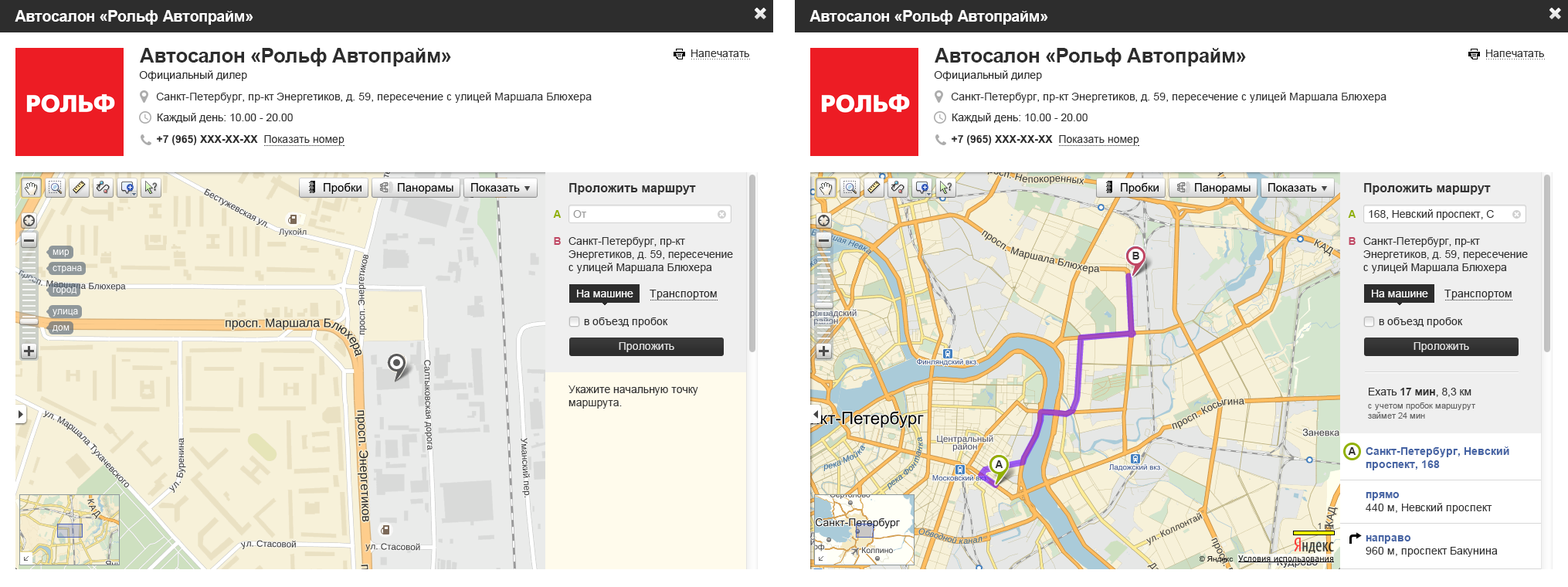
<style>
.page{position:relative;width:1568px;height:587px;background:#ffffff}
.page>*{position:absolute;margin:0}
.t1{font:15.4px "Arial-BoldMT";letter-spacing:-0.02em;color:#ffffff}
.t2{font:20.1px "Arial-BoldMT";letter-spacing:-0.02em;color:#2d2d2d}
.t3{font:10.8px "ArialMT";color:#333333}
.t4{font:9.3px "ArialMT";color:#666666}
.t5{font:10.8px "ArialMT";color:#2c2c2c}
.t6{font:10.8px "ArialMT";color:#2d2d2d}
.t7{font:12.4px "Arial-BoldMT";color:#333333}
.t8{font:10.8px "ArialMT";letter-spacing:-0.005em;color:#333333}
.t9{font:10.8px "Arial-BoldMT";color:#91b002}
.t10{font:10.8px "ArialMT";letter-spacing:-0.005em;color:#999999}
.t11{font:10.8px "Arial-BoldMT";color:#c04663}
.t12{font:10.8px "Arial-BoldMT";color:#333333}
.t13{font:10.8px "ArialMT";color:#ffffff}
.t14{font:10.8px "ArialMT";color:#e0e0e0}
.t15{font:10.8px "Arial-BoldMT";letter-spacing:-0.005em;color:#333333}
.t16{font:8.5px "ArialMT";color:#666666}
.t17{font:10.8px "Arial-BoldMT";color:#4664a4}
</style>
<div class="page">
<p class="t1" style="left:15px;top:10px;width:238px;height:15px">Автосалон «Рольф Автопрайм»</p>
<p class="t1" style="left:809px;top:10px;width:239px;height:15px">Автосалон «Рольф Автопрайм»</p>
<p class="t2" style="left:140px;top:48px;width:311px;height:18px">Автосалон «Рольф Автопрайм»</p>
<p class="t3" style="left:691px;top:49px;width:58px;height:8px">Напечатать</p>
<p class="t2" style="left:935px;top:48px;width:311px;height:18px">Автосалон «Рольф Автопрайм»</p>
<p class="t3" style="left:1486px;top:49px;width:58px;height:8px">Напечатать</p>
<p class="t4" style="left:691px;top:59px;width:59px;height:0px">..........................</p>
<p class="t4" style="left:1486px;top:59px;width:59px;height:0px">..........................</p>
<p class="t5" style="left:139px;top:70px;width:108px;height:11px">Официальный дилер</p>
<p class="t5" style="left:934px;top:70px;width:108px;height:11px">Официальный дилер</p>
<p class="t3" style="left:156px;top:92px;width:436px;height:11px">Санкт-Петербург, пр-кт Энергетиков, д. 59, пересечение с улицей Маршала Блюхера</p>
<p class="t3" style="left:951px;top:92px;width:435px;height:11px">Санкт-Петербург, пр-кт Энергетиков, д. 59, пересечение с улицей Маршала Блюхера</p>
<p class="t6" style="left:158px;top:113px;width:135px;height:10px">Каждый день: 10.00 - 20.00</p>
<p class="t6" style="left:952px;top:113px;width:136px;height:10px">Каждый день: 10.00 - 20.00</p>
<p class="t7" style="left:569px;top:183px;width:127px;height:12px">Проложить маршрут</p>
<p class="t7" style="left:1364px;top:183px;width:127px;height:12px">Проложить маршрут</p>
<p class="t8" style="left:1369px;top:209px;width:125px;height:11px">168, Невский проспект, С</p>
<p class="t9" style="left:553px;top:210px;width:9px;height:8px">А</p>
<p class="t10" style="left:573px;top:210px;width:13px;height:8px">От</p>
<p class="t9" style="left:1348px;top:210px;width:8px;height:8px">А</p>
<p class="t11" style="left:554px;top:237px;width:7px;height:8px">B</p>
<p class="t3" style="left:568px;top:237px;width:165px;height:36px">Санкт-Петербург, пр-кт <br>Энергетиков, д. 59, пересечение<br>с улицей Маршала Блюхера</p>
<p class="t11" style="left:1349px;top:237px;width:7px;height:8px">B</p>
<p class="t3" style="left:1363px;top:237px;width:165px;height:36px">Санкт-Петербург, пр-кт <br>Энергетиков, д. 59, пересечение<br>с улицей Маршала Блюхера</p>
<p class="t12" style="left:1132px;top:252px;width:7px;height:8px">B</p>
<p class="t13" style="left:577px;top:290px;width:56px;height:7px">На машине</p>
<p class="t6" style="left:650px;top:290px;width:67px;height:10px">Транспортом</p>
<p class="t13" style="left:1372px;top:290px;width:56px;height:7px">На машине</p>
<p class="t6" style="left:1444px;top:290px;width:68px;height:10px">Транспортом</p>
<p class="t6" style="left:584px;top:317px;width:84px;height:11px">в объезд пробок</p>
<p class="t6" style="left:1379px;top:317px;width:84px;height:11px">в объезд пробок</p>
<p class="t14" style="left:619px;top:342px;width:55px;height:10px">Проложить</p>
<p class="t14" style="left:1414px;top:342px;width:55px;height:10px">Проложить</p>
<p class="t3" style="left:568px;top:385px;width:130px;height:24px">Укажите начальную точку<br>маршрута.</p>
<p class="t8" style="left:1369px;top:388px;width:102px;height:9px">Ехать <span class="t15">17 мин</span>, 8,3 км</p>
<p class="t16" style="left:1368px;top:402px;width:107px;height:17px">с учетом пробок маршурут<br>займет 24 мин</p>
<p class="t12" style="left:1348px;top:447px;width:8px;height:8px">А</p>
<p class="t17" style="left:1366px;top:446px;width:143px;height:24px">Санкт-Петербург, Невский<br>проспект, 168</p>
<p class="t12" style="left:995px;top:460px;width:8px;height:8px">А</p>
<p class="t3" style="left:1366px;top:492px;width:126px;height:22px"><span class="t17">прямо<br></span>440 м, Невский проспект</p>
<p class="t3" style="left:1366px;top:535px;width:132px;height:22px"><span class="t17">направо<br></span>960 м, проспект Бакунина</p>
</div>
